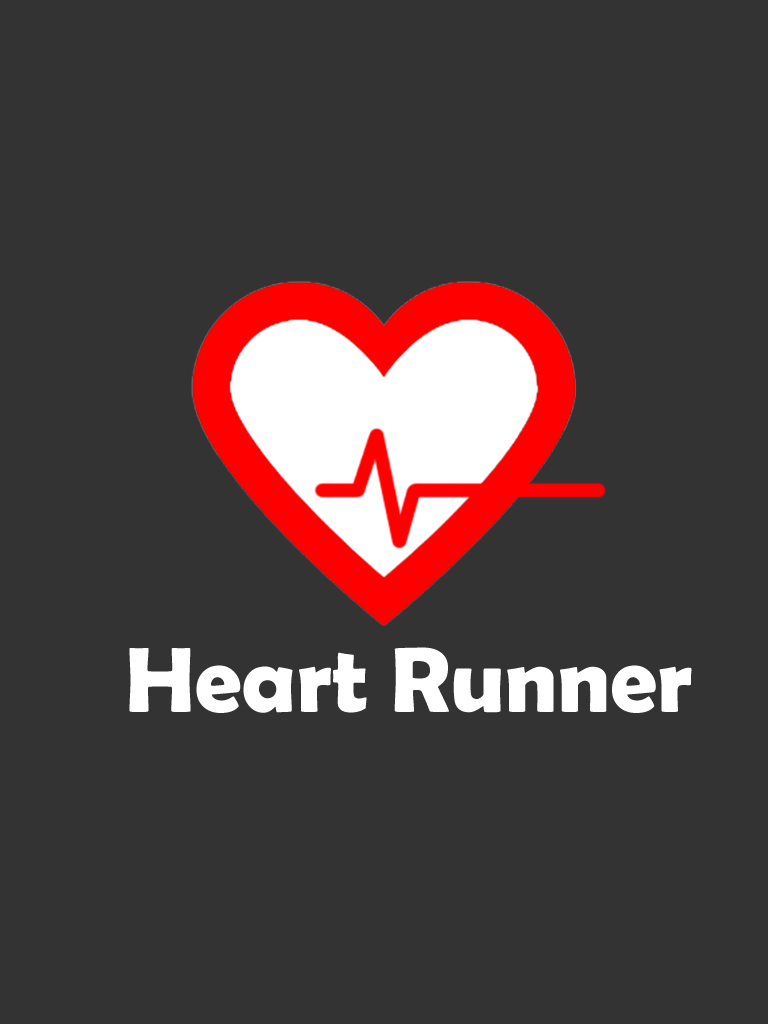
<style>
.page{position:relative;width:768px;height:1024px;background:#333333}
.page>*{position:absolute;margin:0}
.t1{font:93.3px "BerlinSansFBDemi-Bold";color:#ffffff}
</style>
<div class="page">
<p class="t1" style="left:129px;top:647px;width:563px;height:66px">Heart Runner</p>
</div>
